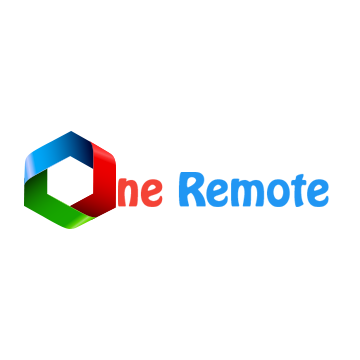
<style>
.page{position:relative;width:360px;height:360px;background:#ffffff}
.page>*{position:absolute;margin:0}
.t1{font:40.8px "HoboStd";color:#2196f3;font-weight:bold;scale:1.04 1}
.t2{font:40.8px "HoboStd";color:#f44336;font-weight:bold;scale:1.04 1}
</style>
<div class="page">
<p class="t1" style="left:118px;top:172px;width:211px;height:35px"><span class="t2">ne </span>Remote</p>
</div>
